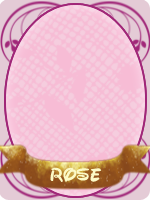
<style>
.page{position:relative;width:150px;height:200px}
.page>*{position:absolute;margin:0}
.t1{font:37.4px "Waltograph";color:#fcfac7}
</style>
<div class="page">
<p class="t1" style="left:50px;top:167px;width:52px;height:15px">rose</p>
</div>
